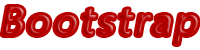
<style>
.page{position:relative;width:200px;height:50px;background:#ffffff}
.page>*{position:absolute;margin:0}
.t1{font:36.8px "MicrosoftYaHei";letter-spacing:0.075em;font-style:italic}
</style>
<div class="page">
<p class="t1" style="left:2px;top:7px;width:196px;height:37px">Bootstrap</p>
</div>
